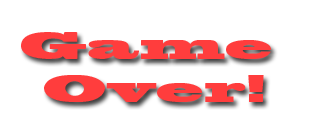
<style>
.page{position:relative;width:320px;height:133px;background:#ffffff}
.page>*{position:absolute;margin:0}
.t1{font:36px "BlackoakStd";color:#ff3d3d}
</style>
<div class="page">
<p class="t1" style="left:21px;top:32px;width:250px;height:70px;text-align:center">Game <br>Over!</p>
</div>
